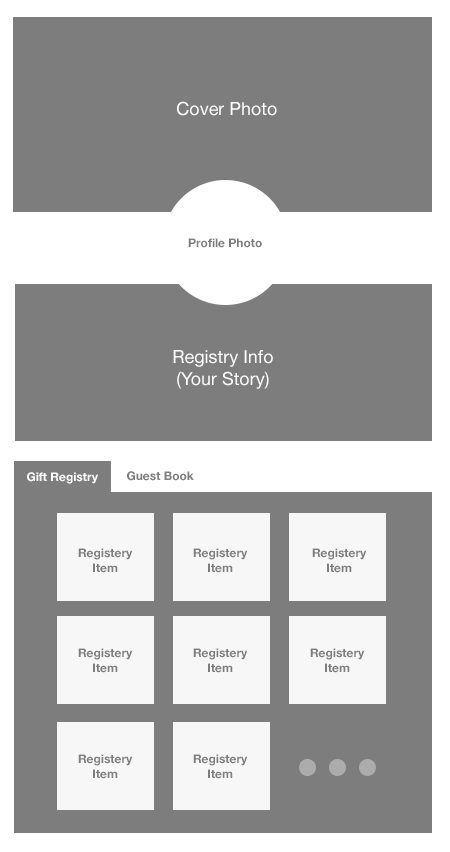
<style>
.page{position:relative;width:450px;height:852px;background:#7d7d7d}
.page>*{position:absolute;margin:0}
.t1{font:18px "HelveticaNeue";color:#fefdfd}
.t2{font:12px "HelveticaNeue-Bold";color:#7d7d7d}
.t3{font:12px "HelveticaNeue-Bold";color:#ffffff}
</style>
<div class="page">
<p class="t1" style="left:177px;top:101px;width:100px;height:15px">Cover Photo</p>
<p class="t2" style="left:188px;top:238px;width:74px;height:10px">Profile Photo</p>
<p class="t1" style="left:173px;top:350px;width:100px;height:39px;text-align:center">Registry Info<br>(Your Story)</p>
<p class="t3" style="left:27px;top:472px;width:71px;height:12px">Gift Registry</p>
<p class="t2" style="left:127px;top:471px;width:67px;height:10px">Guest Book</p>
<p class="t2" style="left:78px;top:548px;width:55px;height:25px;text-align:center">Registery<br>Item</p>
<p class="t2" style="left:193px;top:548px;width:55px;height:25px;text-align:center">Registery<br>Item</p>
<p class="t2" style="left:312px;top:548px;width:55px;height:25px;text-align:center">Registery<br>Item</p>
<p class="t2" style="left:78px;top:648px;width:55px;height:25px;text-align:center">Registery<br>Item</p>
<p class="t2" style="left:193px;top:648px;width:55px;height:25px;text-align:center">Registery<br>Item</p>
<p class="t2" style="left:310px;top:648px;width:55px;height:25px;text-align:center">Registery<br>Item</p>
<p class="t2" style="left:78px;top:754px;width:55px;height:25px;text-align:center">Registery<br>Item</p>
<p class="t2" style="left:193px;top:754px;width:55px;height:25px;text-align:center">Registery<br>Item</p>
</div>
